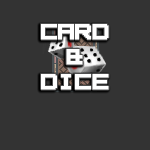
<style>
.page{position:relative;width:150px;height:150px;background:#333333}
.page>*{position:absolute;margin:0}
.t1{font:29.8px/24.8px "SquarePixel-7";color:#ffffff;font-weight:bold}
</style>
<div class="page">
<p class="t1" style="left:41px;top:24px;width:68px;height:66px;text-align:center">card<br>&amp;<br>dice</p>
</div>
